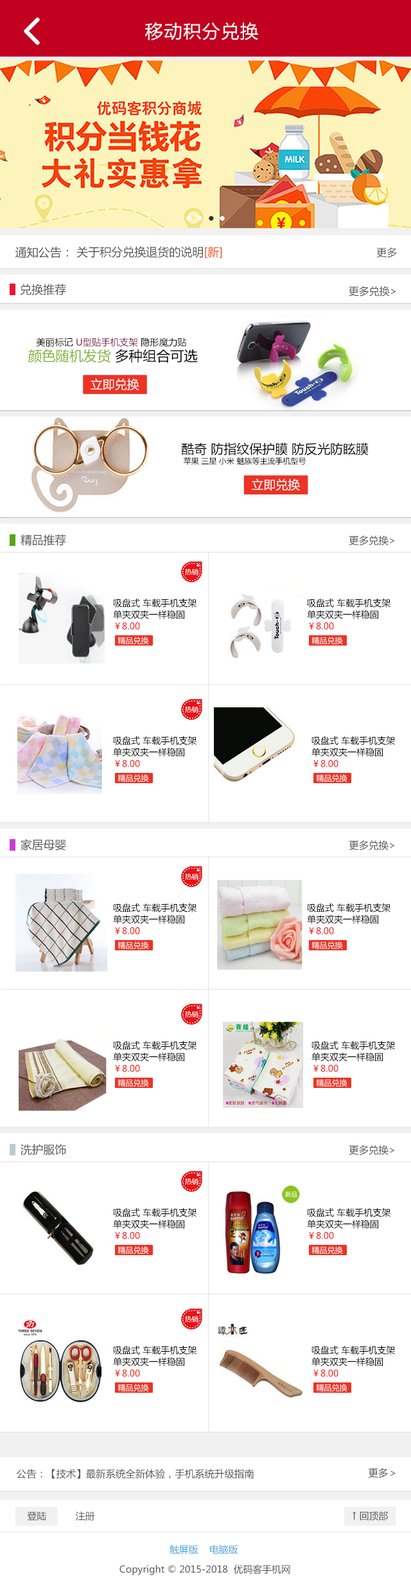
<style>
.page{position:relative;width:411px;height:1594px;background:#ffffff}
.page>*{position:absolute;margin:0}
.t1{font:18px "MicrosoftYaHei";letter-spacing:0.06em;color:#ffffff}
.t2{font:11.6px "MicrosoftYaHei";color:#555555}
.t3{font:11.6px "MicrosoftYaHei";color:#f34607}
.t4{font:10.3px "MicrosoftYaHei";color:#555555}
.t5{font:9.2px/15.4px "MicrosoftYaHei";color:#7e2052}
.t6{font:9.2px/15.4px "MicrosoftYaHei";color:#000000}
.t7{font:13.8px/15.4px "MicrosoftYaHei";color:#87b33c}
.t8{font:13.8px/15.4px "MicrosoftYaHei";color:#000000}
.t9{font:12.3px "MicrosoftYaHei";color:#ffffff}
.t10{font:7.7px/10.3px "MicrosoftYaHei";color:#000000}
.t11{font:12.9px/10.3px "MicrosoftYaHei";color:#000000}
.t12{font:11.4px "MicrosoftYaHei";color:#555555}
.t13{font:9.9px "MicrosoftYaHei";color:#555555}
.t14{font:9px/11.6px "MicrosoftYaHei";color:#000000}
.t15{font:9px/11.6px "MicrosoftYaHei";color:#f50909}
.t16{font:7.7px "MicrosoftYaHei";color:#ffffff}
.t17{font:9.5px "MicrosoftYaHei";color:#555555}
.t18{font:9.5px "MicrosoftYaHei";color:#419edc}
</style>
<div class="page">
<p class="t1" style="left:145px;top:22px;width:113px;height:18px">移动积分兑换</p>
<p class="t2" style="left:15px;top:246px;width:53px;height:12px">通知公告：</p>
<p class="t2" style="left:76px;top:246px;width:146px;height:12px">关于积分兑换退货的说明<span class="t3">[新]</span></p>
<p class="t4" style="left:377px;top:247px;width:20px;height:11px">更多</p>
<p class="t2" style="left:20px;top:283px;width:46px;height:12px">兑换推荐</p>
<p class="t4" style="left:349px;top:286px;width:48px;height:10px">更多兑换&gt;</p>
<p class="t5" style="left:28px;top:337px;width:170px;height:26px;text-align:center"><span class="t6">美丽标记 </span>U型贴手机支架<span class="t6"> 隐形魔力贴 <br></span><span class="t7">颜色随机发货</span><span class="t8"> 多种组合可选</span></p>
<p class="t9" style="left:91px;top:378px;width:48px;height:12px">立即兑换</p>
<p class="t10" style="left:181px;top:442px;width:188px;height:23px"><span class="t11">酷奇 防指纹保护膜 防反光防眩膜<br></span> 苹果 三星 小米 魅族等主流手机型号</p>
<p class="t9" style="left:252px;top:478px;width:48px;height:12px">立即兑换</p>
<p class="t12" style="left:21px;top:534px;width:45px;height:12px">精品推荐</p>
<p class="t13" style="left:349px;top:535px;width:46px;height:11px">更多兑换&gt;</p>
<p class="t14" style="left:113px;top:598px;width:84px;height:31px">吸盘式 车载手机支架 <br>单夹双夹一样稳固<br><span class="t15">￥8.00</span></p>
<p class="t14" style="left:307px;top:598px;width:84px;height:31px">吸盘式 车载手机支架 <br>单夹双夹一样稳固<br><span class="t15">￥8.00</span></p>
<p class="t16" style="left:118px;top:636px;width:31px;height:8px">精品兑换</p>
<p class="t16" style="left:312px;top:636px;width:31px;height:8px">精品兑换</p>
<p class="t14" style="left:113px;top:736px;width:84px;height:31px">吸盘式 车载手机支架 <br>单夹双夹一样稳固<br><span class="t15">￥8.00</span></p>
<p class="t14" style="left:312px;top:736px;width:83px;height:31px">吸盘式 车载手机支架 <br>单夹双夹一样稳固<br><span class="t15">￥8.00</span></p>
<p class="t16" style="left:118px;top:774px;width:31px;height:8px">精品兑换</p>
<p class="t16" style="left:316px;top:774px;width:32px;height:8px">精品兑换</p>
<p class="t12" style="left:21px;top:839px;width:45px;height:11px">家居母婴</p>
<p class="t13" style="left:349px;top:840px;width:46px;height:10px">更多兑换&gt;</p>
<p class="t14" style="left:113px;top:903px;width:84px;height:31px">吸盘式 车载手机支架 <br>单夹双夹一样稳固<br><span class="t15">￥8.00</span></p>
<p class="t14" style="left:307px;top:903px;width:84px;height:31px">吸盘式 车载手机支架 <br>单夹双夹一样稳固<br><span class="t15">￥8.00</span></p>
<p class="t16" style="left:118px;top:941px;width:31px;height:8px">精品兑换</p>
<p class="t16" style="left:312px;top:941px;width:31px;height:8px">精品兑换</p>
<p class="t14" style="left:113px;top:1041px;width:84px;height:31px">吸盘式 车载手机支架 <br>单夹双夹一样稳固<br><span class="t15">￥8.00</span></p>
<p class="t14" style="left:312px;top:1041px;width:83px;height:31px">吸盘式 车载手机支架 <br>单夹双夹一样稳固<br><span class="t15">￥8.00</span></p>
<p class="t16" style="left:118px;top:1079px;width:31px;height:7px">精品兑换</p>
<p class="t16" style="left:316px;top:1079px;width:32px;height:7px">精品兑换</p>
<p class="t12" style="left:21px;top:1144px;width:45px;height:11px">洗护服饰</p>
<p class="t13" style="left:349px;top:1145px;width:46px;height:10px">更多兑换&gt;</p>
<p class="t14" style="left:113px;top:1208px;width:84px;height:31px">吸盘式 车载手机支架 <br>单夹双夹一样稳固<br><span class="t15">￥8.00</span></p>
<p class="t14" style="left:307px;top:1208px;width:84px;height:31px">吸盘式 车载手机支架 <br>单夹双夹一样稳固<br><span class="t15">￥8.00</span></p>
<p class="t16" style="left:118px;top:1246px;width:31px;height:8px">精品兑换</p>
<p class="t16" style="left:312px;top:1246px;width:31px;height:8px">精品兑换</p>
<p class="t14" style="left:113px;top:1345px;width:84px;height:31px">吸盘式 车载手机支架 <br>单夹双夹一样稳固<br><span class="t15">￥8.00</span></p>
<p class="t14" style="left:312px;top:1345px;width:83px;height:31px">吸盘式 车载手机支架 <br>单夹双夹一样稳固<br><span class="t15">￥8.00</span></p>
<p class="t16" style="left:118px;top:1383px;width:31px;height:8px">精品兑换</p>
<p class="t16" style="left:316px;top:1383px;width:32px;height:8px">精品兑换</p>
<p class="t13" style="left:17px;top:1468px;width:238px;height:11px">公告：【技术】最新系统全新体验，手机系统升级指南</p>
<p class="t13" style="left:368px;top:1468px;width:28px;height:10px">更多＞</p>
<p class="t17" style="left:27px;top:1511px;width:19px;height:9px">登陆</p>
<p class="t17" style="left:76px;top:1511px;width:18px;height:9px">注册</p>
<p class="t17" style="left:353px;top:1511px;width:35px;height:9px">↑ 回顶部</p>
<p class="t18" style="left:170px;top:1544px;width:68px;height:10px">触屏版    电脑版</p>
<p class="t17" style="left:120px;top:1564px;width:171px;height:11px">Copyright © 2015-2018  优码客手机网</p>
</div>
